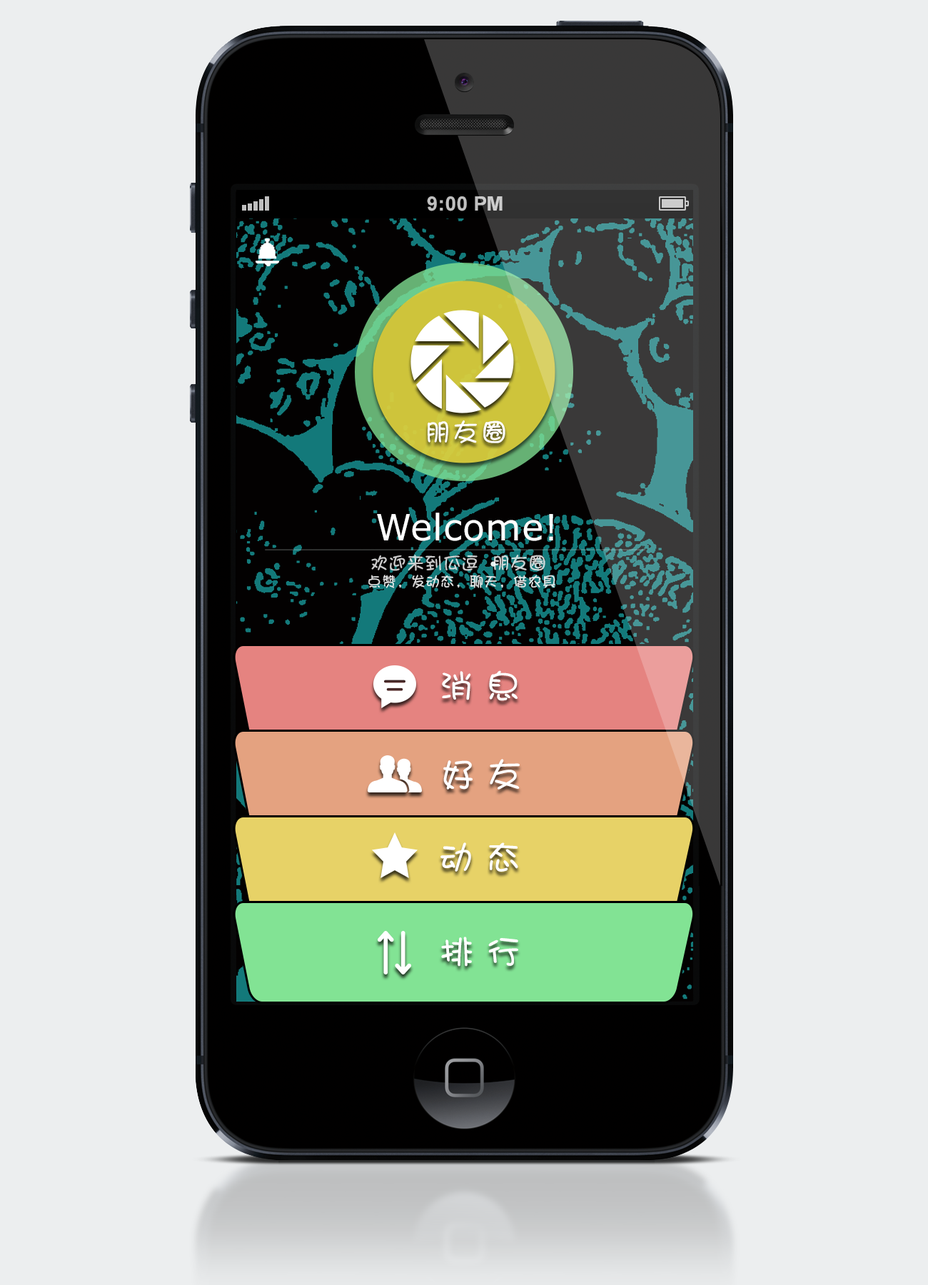
<style>
.page{position:relative;width:928px;height:1285px;background:#eceeef}
.page>*{position:absolute;margin:0}
.t1{font:25.7px "DFPShaoNvW5";letter-spacing:0.1em;color:#ffffff}
.t2{font:36.4px "Verdana";letter-spacing:0.015em;color:#ffffff}
.t3{font:17.8px "DFPShaoNvW5";letter-spacing:0.02em;color:#cccbcb}
.t4{font:14.3px "DFPShaoNvW5";letter-spacing:0.02em;color:#e0e0e0}
.t5{font:34.3px "DFPShaoNvW5";letter-spacing:0.02em;color:#ffffff}
</style>
<div class="page">
<p class="t1" style="left:428px;top:420px;width:77px;height:23px">朋友圈</p>
<p class="t2" style="left:377px;top:513px;width:176px;height:28px">Welcome!</p>
<p class="t3" style="left:371px;top:555px;width:174px;height:16px">欢迎来到瓜逗  朋友圈</p>
<p class="t4" style="left:368px;top:575px;width:187px;height:13px">点赞，发动态，聊天，借农具</p>
<p class="t5" style="left:442px;top:670px;width:76px;height:31px">消 息</p>
<p class="t5" style="left:443px;top:759px;width:77px;height:31px">好 友</p>
<p class="t5" style="left:440px;top:842px;width:78px;height:30px">动 态</p>
<p class="t5" style="left:441px;top:937px;width:77px;height:30px">排 行</p>
</div>
